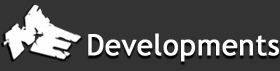
<style>
.page{position:relative;width:280px;height:71px;background:#333333}
.page>*{position:absolute;margin:0}
.t1{font:29px "TrebuchetMS";color:#fffefe;font-weight:bold}
</style>
<div class="page">
<p class="t1" style="left:88px;top:33px;width:191px;height:29px">Developments</p>
</div>
